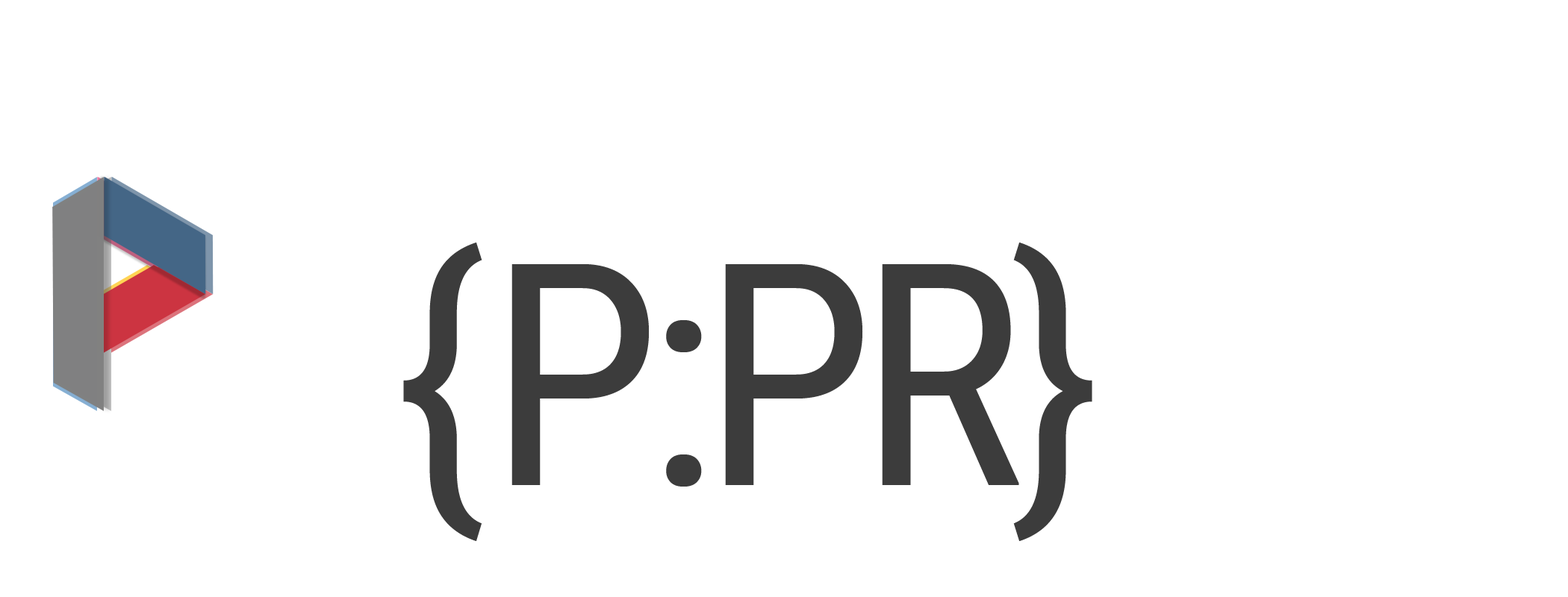
<style>
.page{position:relative;width:1568px;height:597px;background:#ffffff}
.page>*{position:absolute;margin:0}
.t1{font:311.1px "RobotoCondensed-Regular";letter-spacing:-0.05em;color:#3c3c3c}
.t2{font:311.1px "RobotoCondensed-Regular";color:#3c3c3c}
</style>
<div class="page">
<p class="t1" style="left:403px;top:243px;width:689px;height:298px"><span class="t2">{</span>P:PR<span class="t2">}</span></p>
</div>
